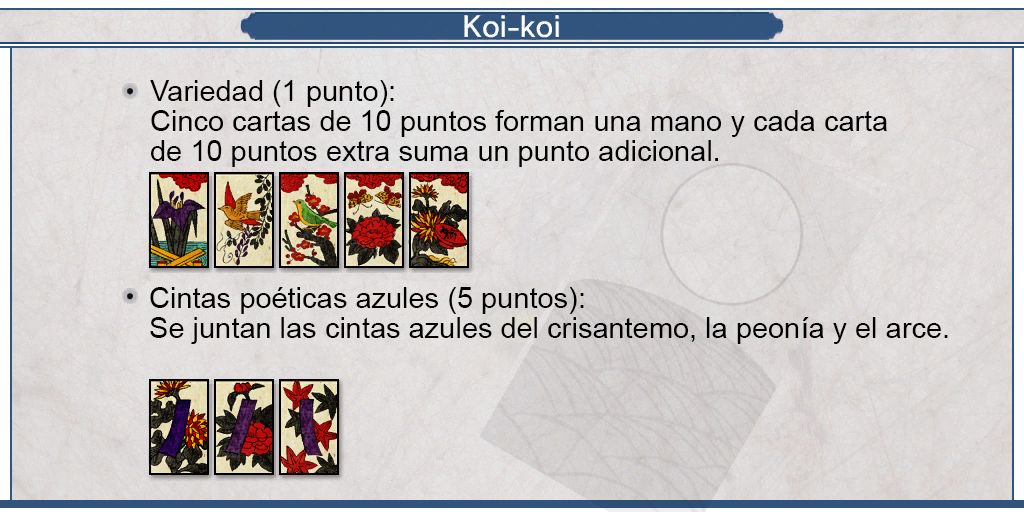
<style>
.page{position:relative;width:1024px;height:512px}
.page>*{position:absolute;margin:0}
.t1{font:29px/30px "ArialMT";color:#000000}
</style>
<div class="page">
<p class="t1" style="left:150px;top:80px;width:737px;height:87px;text-align:justify">Variedad (1 punto):<br>Cinco cartas de 10 puntos forman una mano y cada carta<br>de 10 puntos extra suma un punto adicional.</p>
<p class="t1" style="left:150px;top:287px;width:798px;height:57px;text-align:justify">Cintas poéticas azules (5 puntos):<br>Se juntan las cintas azules del crisantemo, la peonía y el arce.</p>
</div>
